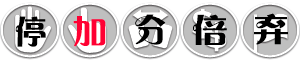
<style>
.page{position:relative;width:300px;height:60px;background:#ffffff}
.page>*{position:absolute;margin:0}
.t1{font:35px "FZCHYFW--GB1-0";color:#000000}
.t2{font:35px "FZCHYFW--GB1-0";color:#ff0033}
.t3{font:35px "FZCHYFW--GB1-0";color:#000000;scale:1.1 1}
</style>
<div class="page">
<p class="t1" style="left:15px;top:16px;width:31px;height:31px">停</p>
<p class="t2" style="left:73px;top:16px;width:33px;height:31px">加</p>
<p class="t1" style="left:135px;top:14px;width:31px;height:31px">分</p>
<p class="t3" style="left:193px;top:14px;width:34px;height:31px">倍</p>
<p class="t3" style="left:254px;top:13px;width:34px;height:32px">弃</p>
</div>
